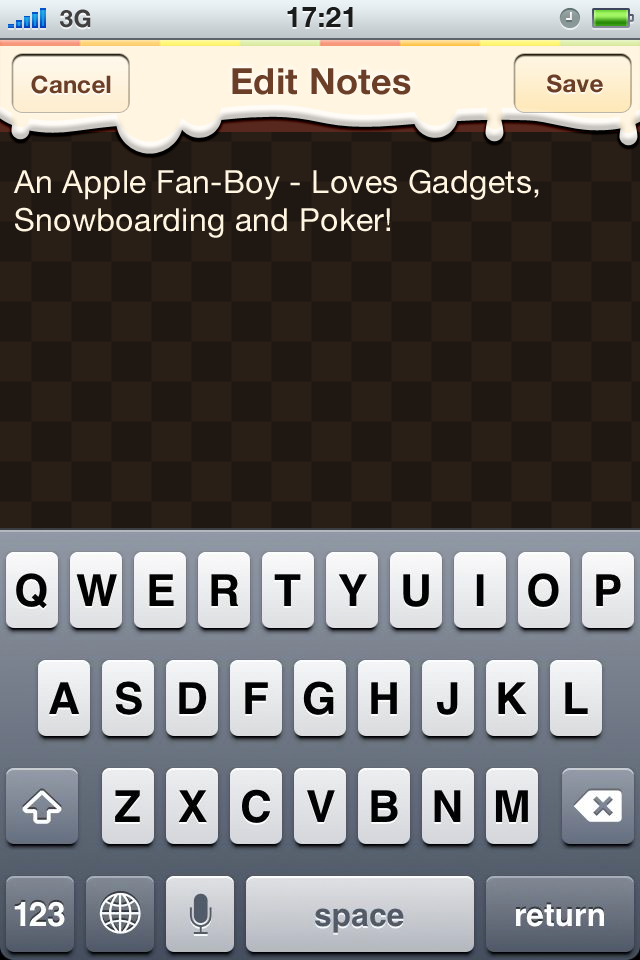
<style>
.page{position:relative;width:640px;height:960px}
.page>*{position:absolute;margin:0}
.t1{font:24px "HelveticaNeue-Bold";color:#404040;text-transform:uppercase}
.t2{font:28px "HelveticaNeue-Bold";color:#1a1b1b;text-transform:uppercase}
.t3{font:24px "HelveticaNeue-Bold";letter-spacing:0.01em;color:#6a3e27}
.t4{font:36px "HelveticaNeue-Bold";letter-spacing:0.01em;color:#6a3e27}
.t5{font:32px "HelveticaNeue";letter-spacing:0.01em;color:#fff5e1}
</style>
<div class="page">
<p class="t1" style="left:60px;top:9px;width:31px;height:19px">3G</p>
<p class="t2" style="left:287px;top:7px;width:66px;height:20px">17:21</p>
<p class="t3" style="left:31px;top:75px;width:80px;height:19px">Cancel</p>
<p class="t4" style="left:232px;top:68px;width:179px;height:27px">Edit Notes</p>
<p class="t3" style="left:547px;top:74px;width:56px;height:19px">Save</p>
<p class="t5" style="left:13px;top:169px;width:526px;height:69px">An Apple Fan-Boy - Loves Gadgets,<br>Snowboarding and Poker!</p>
</div>
